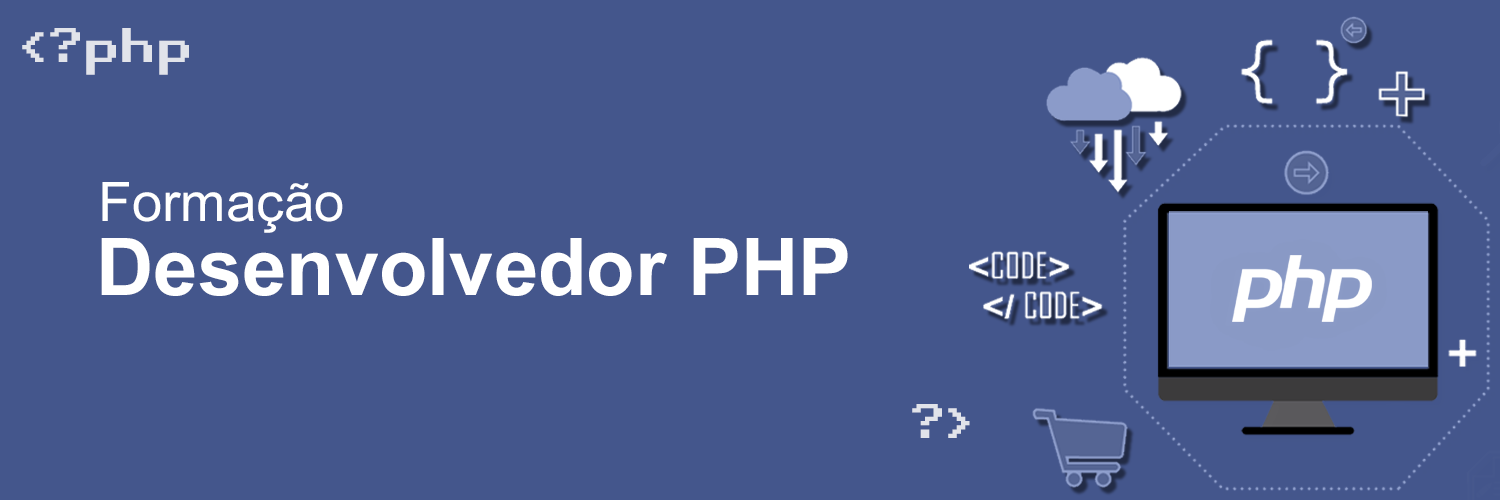
<style>
.page{position:relative;width:1500px;height:500px;background:#44568c}
.page>*{position:absolute;margin:0}
.t1{font:46.7px "RetroGaming";color:#e1e3ea}
.t2{font:54.6px "ArialMT";color:#ffffff}
.t3{font:79.4px "Arial-BoldMT";color:#ffffff}
</style>
<div class="page">
<p class="t1" style="left:22px;top:28px;width:167px;height:47px">&lt;?php</p>
<p class="t2" style="left:102px;top:182px;width:241px;height:51px">Formação</p>
<p class="t3" style="left:101px;top:238px;width:747px;height:58px">Desenvolvedor PHP</p>
<p class="t1" style="left:912px;top:404px;width:58px;height:34px">?&gt;</p>
</div>
